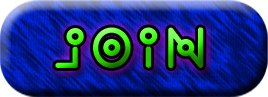
<style>
.page{position:relative;width:268px;height:97px}
.page>*{position:absolute;margin:0}
.t1{font:58.3px "wearealien!!"}
</style>
<div class="page">
<p class="t1" style="left:55px;top:27px;width:149px;height:41px">join</p>
</div>
